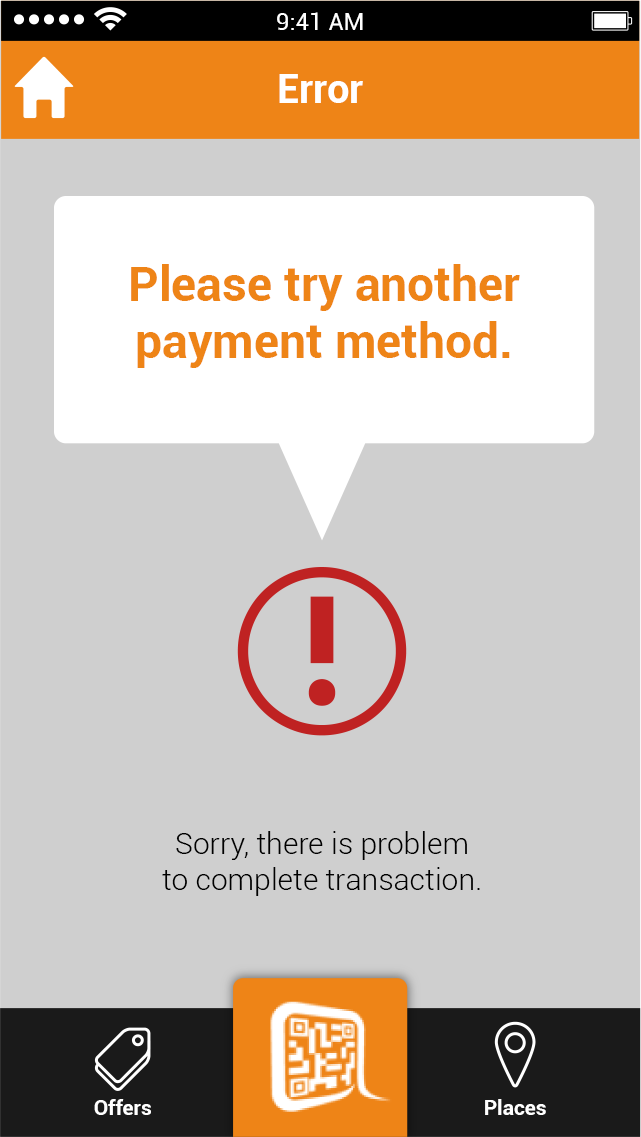
<style>
.page{position:relative;width:641px;height:1137px;background:#cfcfcf}
.page>*{position:absolute;margin:0}
.t1{font:24px "Roboto-Regular";color:#ffffff}
.t2{font:40px "Roboto-Bold";color:#ffffff}
.t3{font:48px "Roboto-Bold";color:#ee8417}
.t4{font:30px "Roboto-Light";color:#000000}
.t5{font:21px "Roboto-Bold";color:#ffffff}
</style>
<div class="page">
<p class="t1" style="left:277px;top:12px;width:86px;height:18px">9:41 AM</p>
<p class="t2" style="left:279px;top:74px;width:84px;height:29px">Error</p>
<p class="t3" style="left:131px;top:264px;width:389px;height:104px;text-align:center">Please try another<br>payment method.</p>
<p class="t4" style="left:162px;top:831px;width:318px;height:65px;text-align:center">Sorry, there is problem<br>to complete transaction.</p>
<p class="t5" style="left:94px;top:1099px;width:57px;height:16px">Offers</p>
<p class="t5" style="left:485px;top:1099px;width:61px;height:16px">Places</p>
</div>
